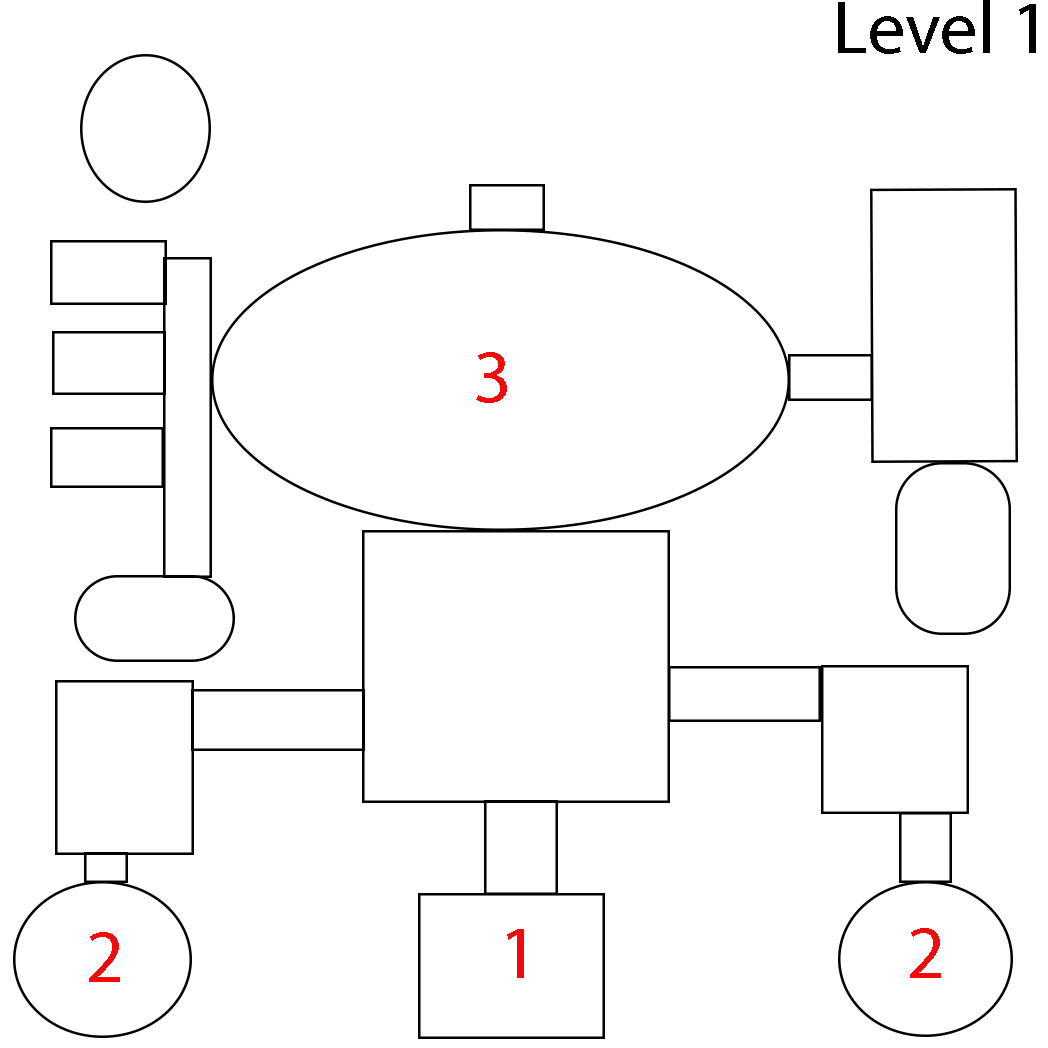
<style>
.page{position:relative;width:1048px;height:1048px;background:#ffffff}
.page>*{position:absolute;margin:0}
.t1{font:75px "MyriadPro-Regular";color:#000000}
.t2{font:75px "MyriadPro-Regular";color:#f40a0a}
</style>
<div class="page">
<p class="t1" style="left:838px;top:0px;width:198px;height:54px">Level 1</p>
<p class="t2" style="left:476px;top:352px;width:31px;height:51px">3</p>
<p class="t2" style="left:507px;top:929px;width:17px;height:49px">1</p>
<p class="t2" style="left:910px;top:928px;width:31px;height:50px">2</p>
<p class="t2" style="left:89px;top:932px;width:31px;height:50px">2</p>
</div>
